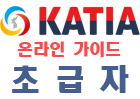
<style>
.page{position:relative;width:140px;height:99px;background:#ffffff}
.page>*{position:absolute;margin:0}
.t1{font:16px "HeadlineR-HM";color:#fe494b}
.t2{font:29.5px "HeadlineR-HM";color:#445e91}
</style>
<div class="page">
<p class="t1" style="left:17px;top:41px;width:104px;height:16px">온라인 가이드</p>
<p class="t2" style="left:12px;top:65px;width:117px;height:28px">초 급 자</p>
</div>
